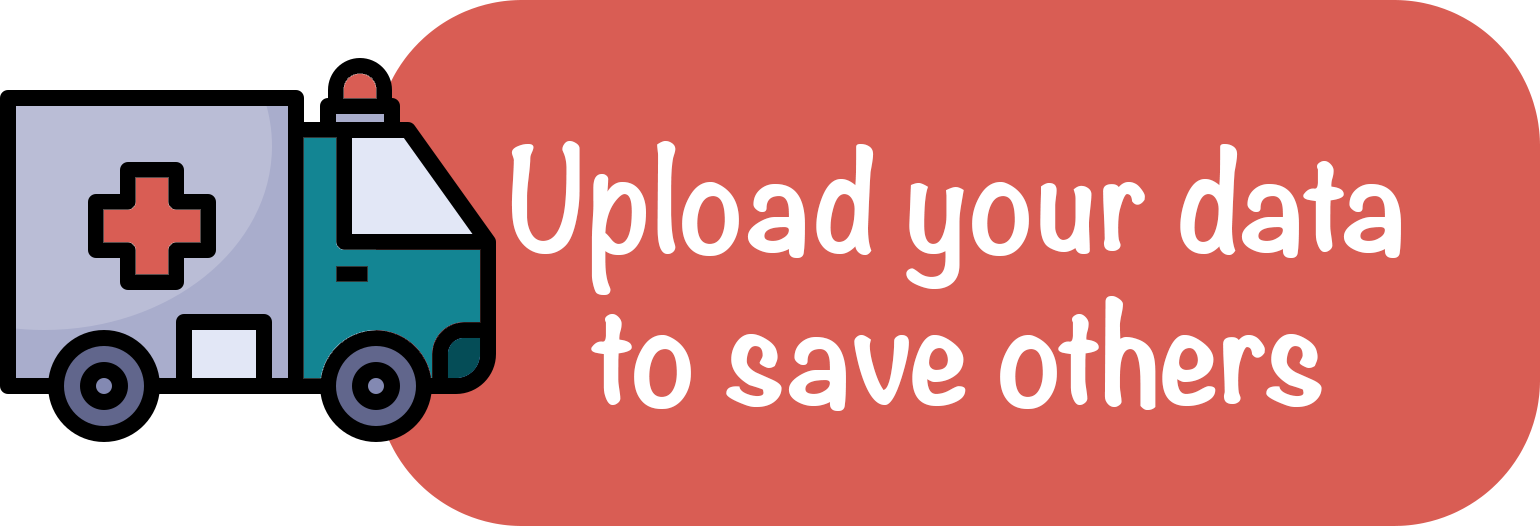
<style>
.page{position:relative;width:1540px;height:526px;background:#d95d54}
.page>*{position:absolute;margin:0}
.t1{font:127px "Noteworthy-Bold";color:#ffffff}
</style>
<div class="page">
<p class="t1" style="left:511px;top:141px;width:890px;height:270px;text-align:center">Upload your data to save others</p>
</div>
